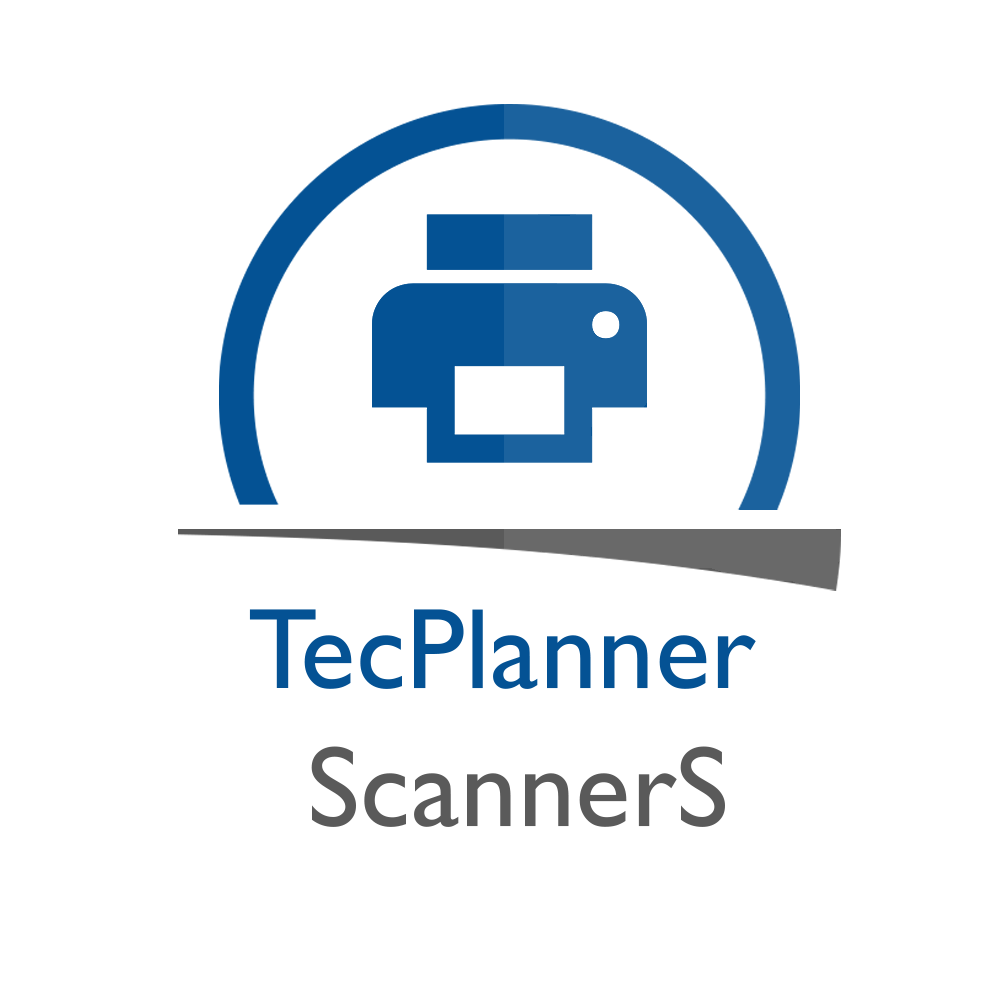
<style>
.page{position:relative;width:1000px;height:1000px;background:#ffffff}
.page>*{position:absolute;margin:0}
.t1{font:115.3px "GillSansMT";color:#045294}
.t2{font:115.3px "GillSansMT";color:#5a5a5a}
</style>
<div class="page">
<p class="t1" style="left:249px;top:609px;width:507px;height:218px;text-align:center">TecPlanner <br><span class="t2">ScannerS</span></p>
</div>
